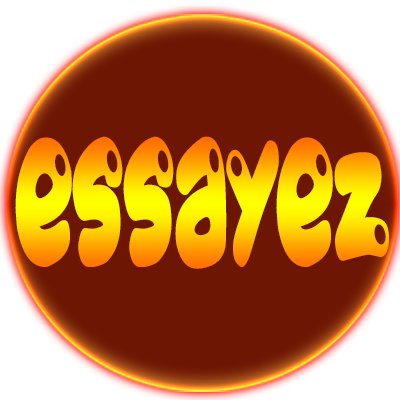
<style>
.page{position:relative;width:400px;height:400px;background:#6d1603}
.page>*{position:absolute;margin:0}
.t1{font:135.9px "JuicyFruity";scale:0.45 1}
</style>
<div class="page">
<p class="t1" style="left:15px;top:136px;width:374px;height:133px">essayez</p>
</div>
